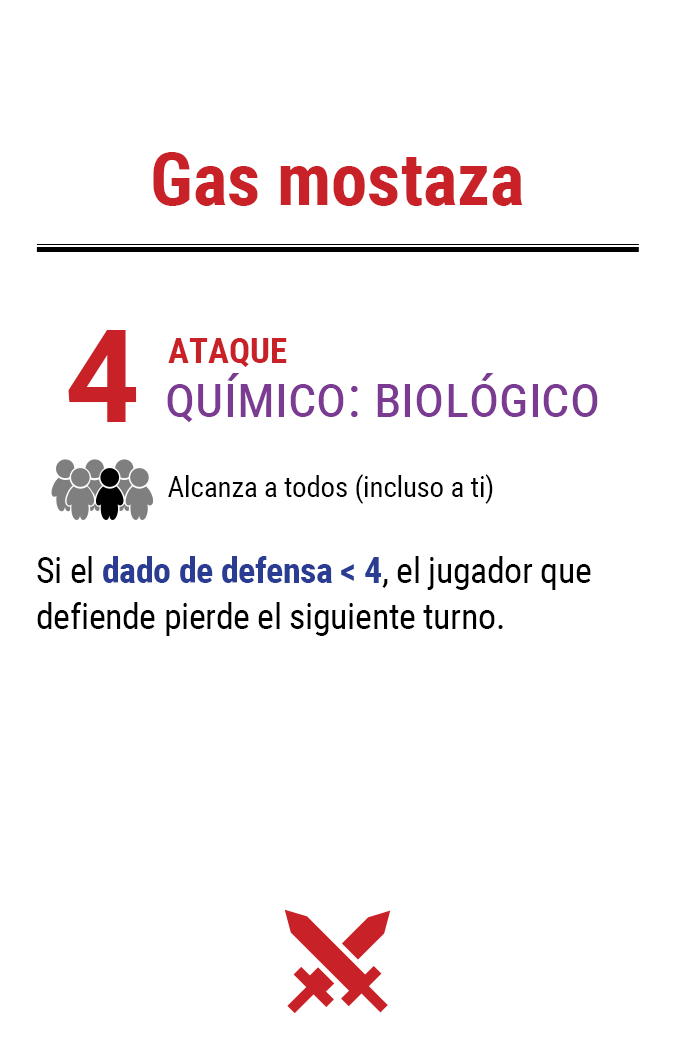
<style>
.page{position:relative;width:675px;height:1050px;background:#ffffff}
.page>*{position:absolute;margin:0}
.t1{font:72.9px "RobotoCondensed-Bold";color:#c82127}
.t2{font:130px "Roboto-Bold";letter-spacing:-0.06em;color:#c82127}
.t3{font:35px "RobotoCondensed-Bold";color:#c82127}
.t4{font:58.3px "RobotoCondensed-Regular";color:#7c3b92;font-variant:small-caps}
.t5{font:29.2px "RobotoCondensed-Regular";letter-spacing:-0.01em;color:#000000}
.t6{font:35.8px/45.8px "RobotoCondensed-Regular";letter-spacing:-0.01em;color:#000000}
.t7{font:35.8px/45.8px "RobotoCondensed-Bold";letter-spacing:-0.01em;color:#2a3d93}
</style>
<div class="page">
<p class="t1" style="left:153px;top:152px;width:370px;height:54px">Gas mostaza</p>
<p class="t2" style="left:68px;top:330px;width:69px;height:92px">4</p>
<p class="t3" style="left:168px;top:338px;width:119px;height:29px">ATAQUE</p>
<p class="t4" style="left:167px;top:373px;width:431px;height:50px">químico: biológico</p>
<p class="t5" style="left:168px;top:474px;width:325px;height:30px">Alcanza a todos (incluso a ti)</p>
<p class="t6" style="left:37px;top:556px;width:554px;height:80px">Si el <span class="t7">dado de defensa &lt; 4</span>, el jugador que defiende pierde el siguiente turno.</p>
</div>
